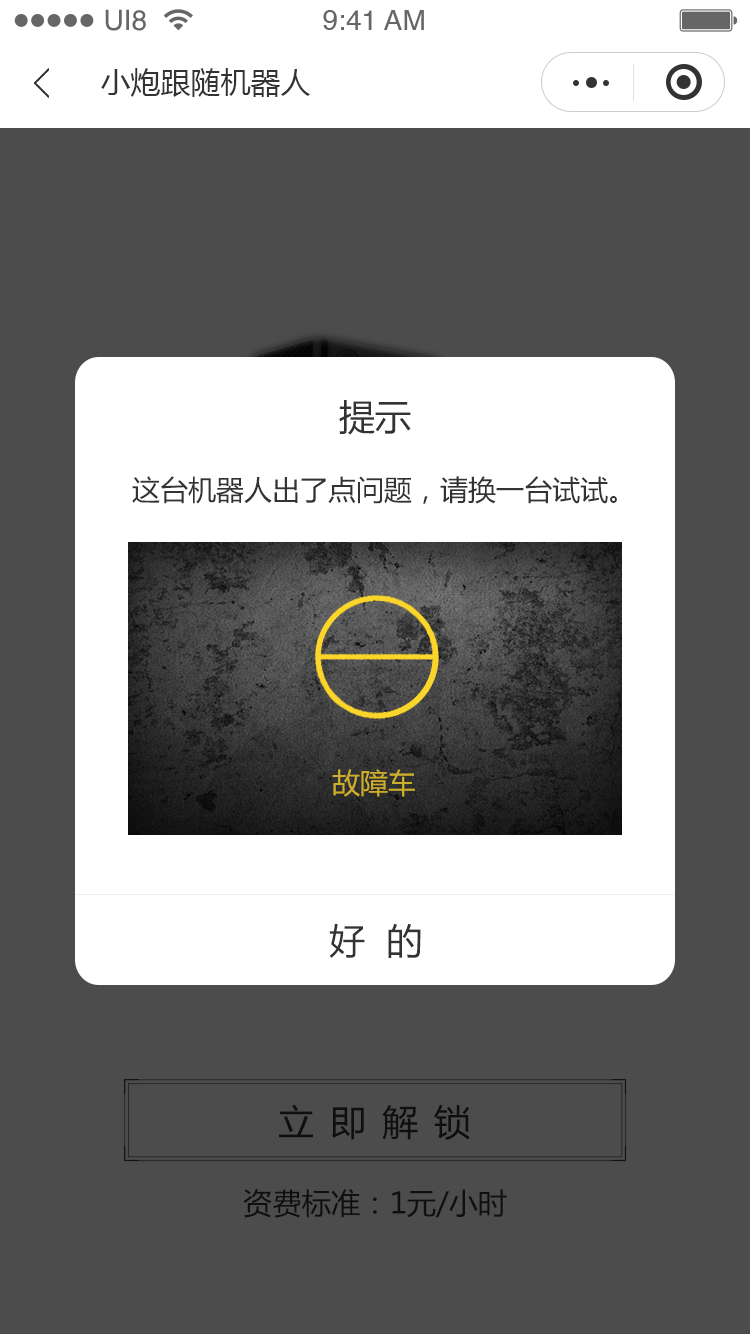
<style>
.page{position:relative;width:750px;height:1334px;background:#4c4c4c}
.page>*{position:absolute;margin:0}
.t1{font:28.1px "Helvetica";color:#666666}
.t2{font:30px "MicrosoftYaHei";color:#333333}
.t3{font:36px "MicrosoftYaHei";color:#333333}
.t4{font:28px "MicrosoftYaHei";color:#333333}
.t5{font:28px "MicrosoftYaHei";color:#cdaf2c}
.t6{font:36px "MicrosoftYaHei";letter-spacing:0.44em;color:#0f0f0f}
.t7{font:29.3px "MicrosoftYaHei";color:#0f0f0f}
</style>
<div class="page">
<p class="t1" style="left:105px;top:9px;width:41px;height:22px">UI8</p>
<p class="t1" style="left:323px;top:10px;width:101px;height:20px">9:41 AM</p>
<p class="t2" style="left:101px;top:68px;width:210px;height:29px">小炮跟随机器人</p>
<p class="t3" style="left:339px;top:400px;width:72px;height:35px">提示</p>
<p class="t4" style="left:132px;top:476px;width:485px;height:28px">这台机器人出了点问题，请换一台试试。</p>
<p class="t5" style="left:332px;top:769px;width:83px;height:28px">故障车</p>
<p class="t3" style="left:329px;top:923px;width:92px;height:35px">好  的</p>
<p class="t6" style="left:279px;top:1104px;width:191px;height:36px">立即解锁</p>
<p class="t7" style="left:243px;top:1189px;width:264px;height:29px">资费标准：1元/小时</p>
</div>
